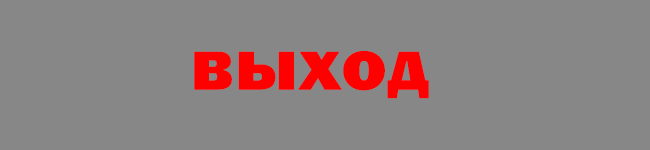
<style>
.page{position:relative;width:650px;height:150px;background:#878787}
.page>*{position:absolute;margin:0}
.t1{font:75px "FranklinGothic-Heavy";color:#ff0000;font-weight:bold}
</style>
<div class="page">
<p class="t1" style="left:194px;top:51px;width:235px;height:48px">выход</p>
</div>
